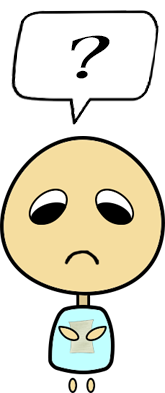
<style>
.page{position:relative;width:165px;height:393px;background:#ffffff}
.page>*{position:absolute;margin:0}
.t1{font:12.5px "FootlightMTLight";color:#000000;scale:1.46 1}
</style>
<div class="page">
<p class="t1" style="left:71px;top:35px;width:39px;height:44px;rotate:-1deg">?</p>
</div>
